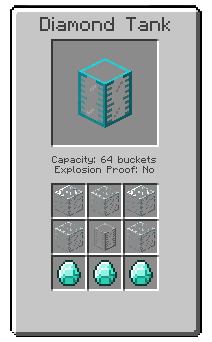
<style>
.page{position:relative;width:212px;height:342px;background:#c6c6c6}
.page>*{position:absolute;margin:0}
.t1{font:16px "Minecraftia";color:#404040}
.t2{font:8px "Minecraftia";color:#404040}
</style>
<div class="page">
<p class="t1" style="left:40px;top:17px;width:130px;height:14px">Diamond Tank</p>
<p class="t2" style="left:52px;top:156px;width:104px;height:18px;text-align:center">Capacity: 64 buckets<br>Explosion Proof: No</p>
</div>
